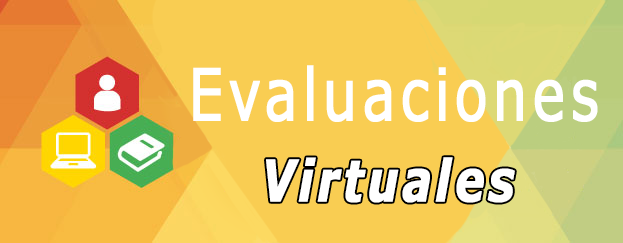
<style>
.page{position:relative;width:623px;height:243px;background:#f9cd52}
.page>*{position:absolute;margin:0}
.t1{font:72px "Verdana";letter-spacing:0.075em;color:#ffffff;font-weight:bold;scale:0.75 1}
.t2{font:57.6px "Verdana-BoldItalic";letter-spacing:0.075em;color:#ffffff;font-weight:bold;scale:0.75 1}
</style>
<div class="page">
<p class="t1" style="left:193px;top:65px;width:405px;height:57px">Evaluaciones</p>
<p class="t2" style="left:266px;top:157px;width:249px;height:46px">Virtuales</p>
</div>
